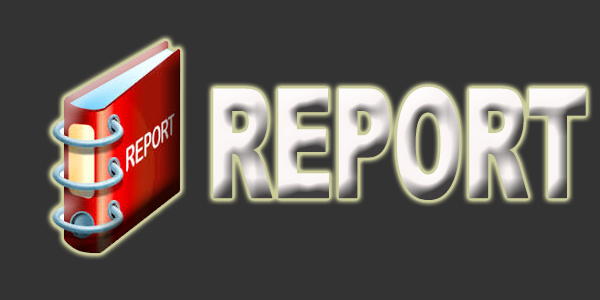
<style>
.page{position:relative;width:600px;height:300px;background:#333333}
.page>*{position:absolute;margin:0}
.t1{font:152.8px "Arial-Black";scale:0.55 1}
</style>
<div class="page">
<p class="t1" style="left:213px;top:86px;width:373px;height:114px">REPORT</p>
</div>
